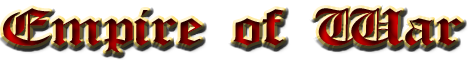
<style>
.page{position:relative;width:468px;height:60px;background:#ffffff}
.page>*{position:absolute;margin:0}
.t1{font:48.1px "OldEnglish";scale:1.49 1}
</style>
<div class="page">
<p class="t1" style="left:3px;top:8px;width:459px;height:45px">Empire of War</p>
</div>
